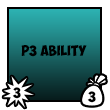
<style>
.page{position:relative;width:110px;height:110px;background:#ffffff}
.page>*{position:absolute;margin:0}
.t1{font:10.6px "ObelixPro";color:#000000}
</style>
<div class="page">
<p class="t1" style="left:21px;top:45px;width:66px;height:12px">P3 Ability</p>
<p class="t1" style="left:12px;top:87px;width:9px;height:12px">3</p>
<p class="t1" style="left:87px;top:91px;width:9px;height:12px">3</p>
</div>
